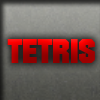
<style>
.page{position:relative;width:100px;height:100px}
.page>*{position:absolute;margin:0}
.t1{font:33.2px "Autumn";scale:1.06 1}
</style>
<div class="page">
<p class="t1" style="left:7px;top:39px;width:88px;height:24px">TETRIS</p>
</div>
